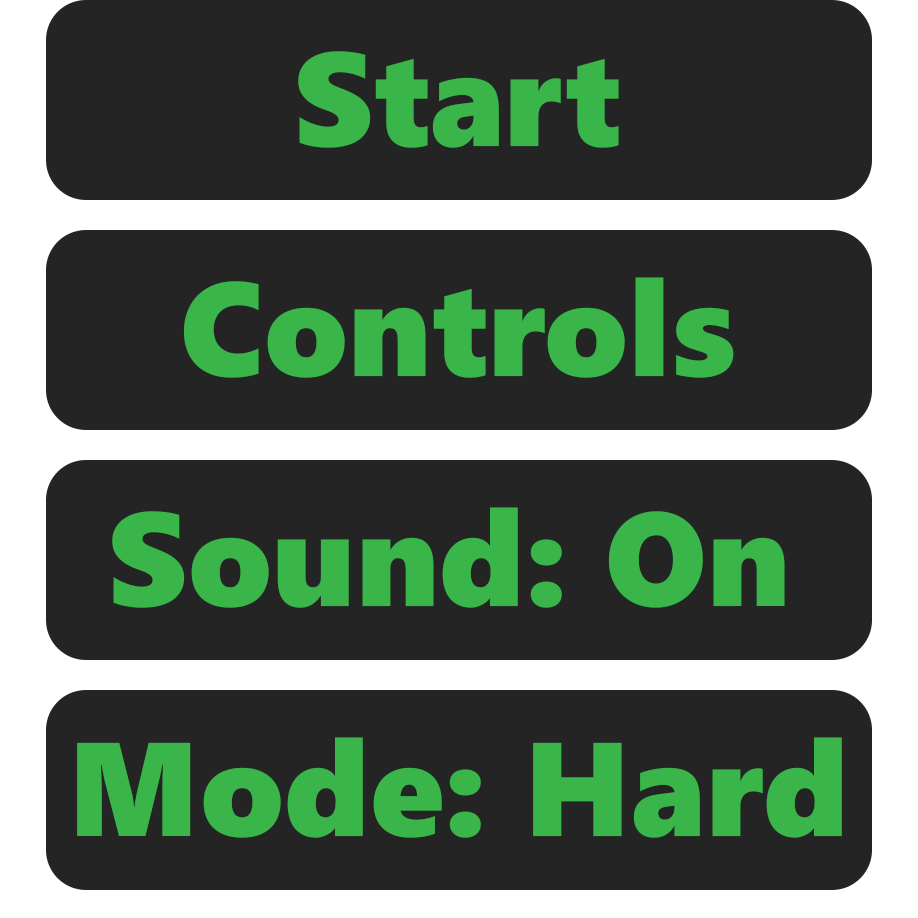
<style>
.page{position:relative;width:918px;height:918px;background:#242424}
.page>*{position:absolute;margin:0}
.t1{font:133.3px "SegoeWP-Black";color:#39b54a}
</style>
<div class="page">
<p class="t1" style="left:298px;top:51px;width:321px;height:97px">Start</p>
<p class="t1" style="left:183px;top:277px;width:551px;height:101px">Controls</p>
<p class="t1" style="left:112px;top:507px;width:673px;height:101px">Sound: On</p>
<p class="t1" style="left:77px;top:737px;width:765px;height:101px">Mode: Hard</p>
</div>
